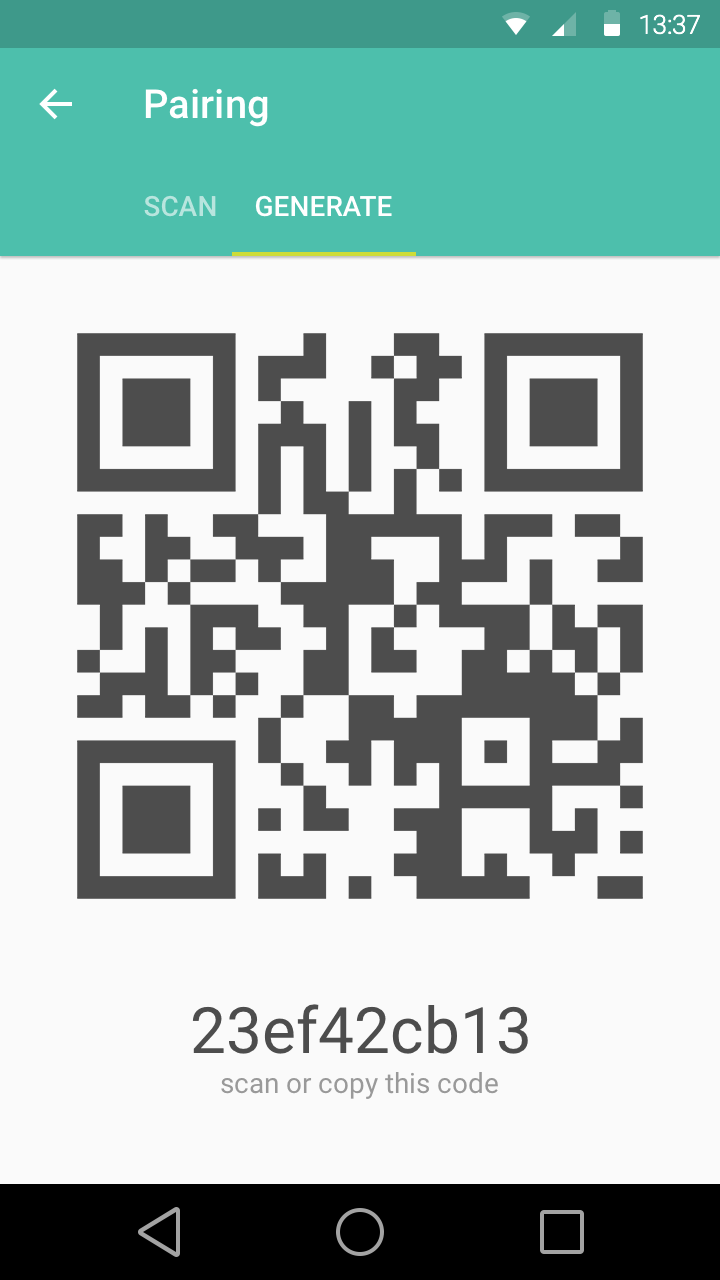
<style>
.page{position:relative;width:720px;height:1280px;background:#fafafa}
.page>*{position:absolute;margin:0}
.t1{font:40px "Roboto-Medium";color:#ffffff}
.t2{font:28px "Roboto-Medium";color:#b8e5de;text-transform:uppercase}
.t3{font:28px "Roboto-Medium";color:#ffffff;text-transform:uppercase}
.t4{font:64px "Roboto-Regular";color:#4d4d4d}
.t5{font:28px "Roboto-Regular";color:#999999}
</style>
<div class="page">
<p class="t1" style="left:145px;top:88px;width:123px;height:39px">Pairing</p>
<p class="t2" style="left:144px;top:195px;width:72px;height:22px">Scan</p>
<p class="t3" style="left:255px;top:195px;width:137px;height:22px">Generate</p>
<p class="t4" style="left:192px;top:1004px;width:336px;height:50px">23ef42cb13</p>
<p class="t5" style="left:221px;top:1072px;width:277px;height:27px">scan or copy this code</p>
</div>
